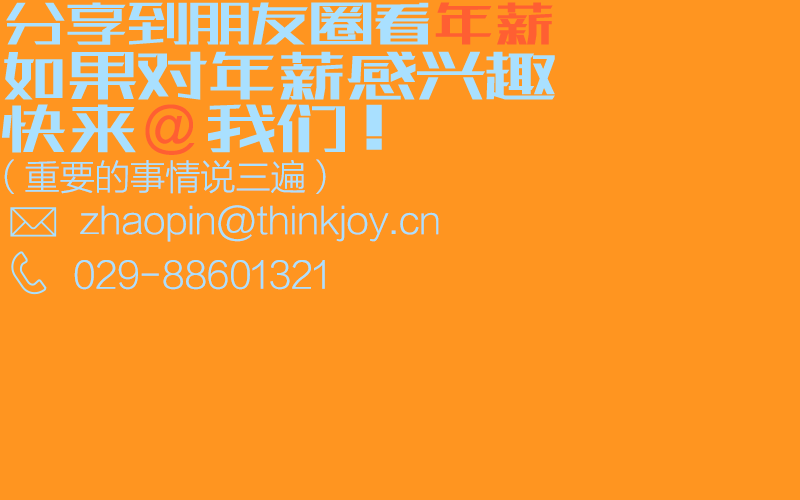
<style>
.page{position:relative;width:800px;height:500px;background:#ff9520}
.page>*{position:absolute;margin:0}
.t1{font:68px "huxiaobo-gdh";letter-spacing:-0.1em;color:#a9e0ff}
.t2{font:68px "huxiaobo-gdh";letter-spacing:-0.1em;color:#ff5f32}
.t3{font:77.3px "huxiaobo-gdh";letter-spacing:-0.1em;color:#a9e0ff}
.t4{font:53.5px "ArialMT";letter-spacing:-0.1em;color:#ff5f32}
.t5{font:35.2px "FZLTXHK--GBK1-0";color:#a9e0ff}
.t6{font:36.2px "FZLTXHK--GBK1-0";color:#a9e0ff}
.t7{font:36.3px "FZLTXHK--GBK1-0";color:#a9e0ff}
</style>
<div class="page">
<p class="t1" style="left:6px;top:2px;width:547px;height:43px">分享到朋友圈看<span class="t2">年薪</span></p>
<p class="t3" style="left:4px;top:51px;width:551px;height:49px">如果对年薪感兴趣</p>
<p class="t3" style="left:2px;top:104px;width:380px;height:49px">快来      我们！</p>
<p class="t4" style="left:145px;top:104px;width:50px;height:51px">@</p>
<p class="t5" style="left:4px;top:159px;width:322px;height:35px">（重要的事情说三遍）</p>
<p class="t6" style="left:80px;top:205px;width:359px;height:37px">zhaopin@thinkjoy.cn</p>
<p class="t7" style="left:74px;top:260px;width:251px;height:30px">029-88601321</p>
</div>
